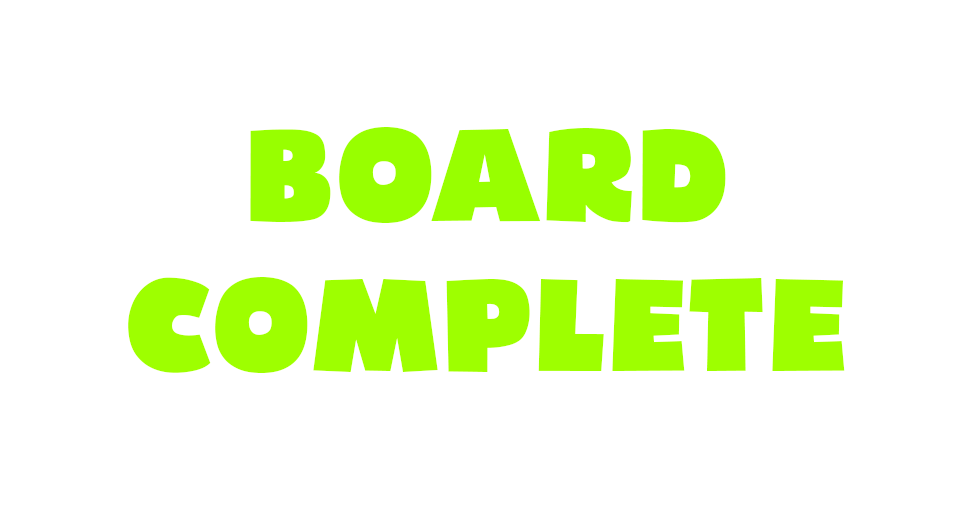
<style>
.page{position:relative;width:960px;height:512px;background:#ffffff}
.page>*{position:absolute;margin:0}
.t1{font:125px "Bumpo";color:#9eff00}
</style>
<div class="page">
<p class="t1" style="left:128px;top:127px;width:717px;height:246px;text-align:center">BOARD<br>COMPLETE</p>
</div>
